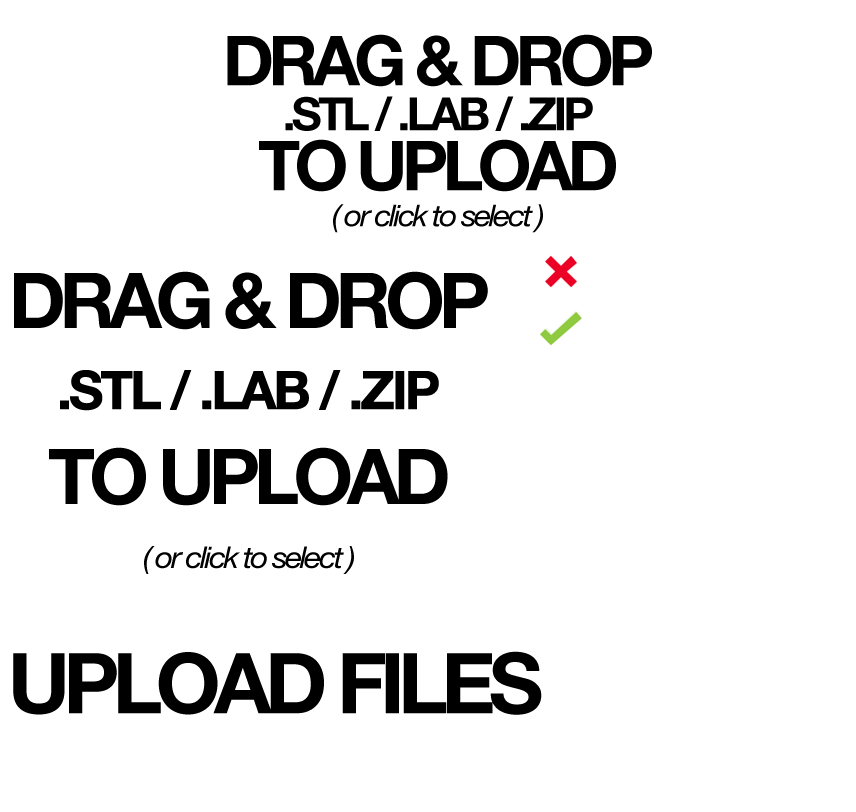
<style>
.page{position:relative;width:856px;height:812px;background:#ffffff}
.page>*{position:absolute;margin:0}
.t1{font:30px/36px "HelveticaNeue-Italic";letter-spacing:-0.08em;color:#000000;scale:1.06 1}
.t2{font:69px "HelveticaNeue-Bold";letter-spacing:-0.08em;color:#000000}
.t3{font:46px/45px "HelveticaNeue-Bold";letter-spacing:-0.08em;color:#000000}
.t4{font:69px/60px "HelveticaNeue-Bold";letter-spacing:-0.08em;color:#000000}
.t5{font:30px/64px "HelveticaNeue-Italic";letter-spacing:-0.08em;color:#000000;scale:1.06 1}
.t6{font:77px "HelveticaNeue-Bold";letter-spacing:-0.08em;color:#000000}
.t7{font:53px/81px "HelveticaNeue-Bold";letter-spacing:-0.08em;color:#000000;font-weight:bold}
.t8{font:77px/95px "HelveticaNeue-Bold";letter-spacing:-0.08em;color:#000000}
.t9{font:84px "HelveticaNeue-Bold";letter-spacing:-0.08em;color:#000000}
</style>
<div class="page">
<p class="t1" style="left:227px;top:34px;width:425px;height:199px;text-align:center"><span class="t2">DRAG &amp; DROP<br></span><span class="t3">.STL / .LAB / .ZIP<br></span><span class="t4">TO UPLOAD<br></span>( or click to select )</p>
<p class="t5" style="left:14px;top:271px;width:474px;height:303px;text-align:center"><span class="t6">DRAG &amp; DROP<br></span><span class="t7">.STL / .LAB / .ZIP<br></span><span class="t8">TO UPLOAD<br></span>( or click to select )</p>
<p class="t9" style="left:13px;top:651px;width:529px;height:64px">UPLOAD FILES</p>
</div>
